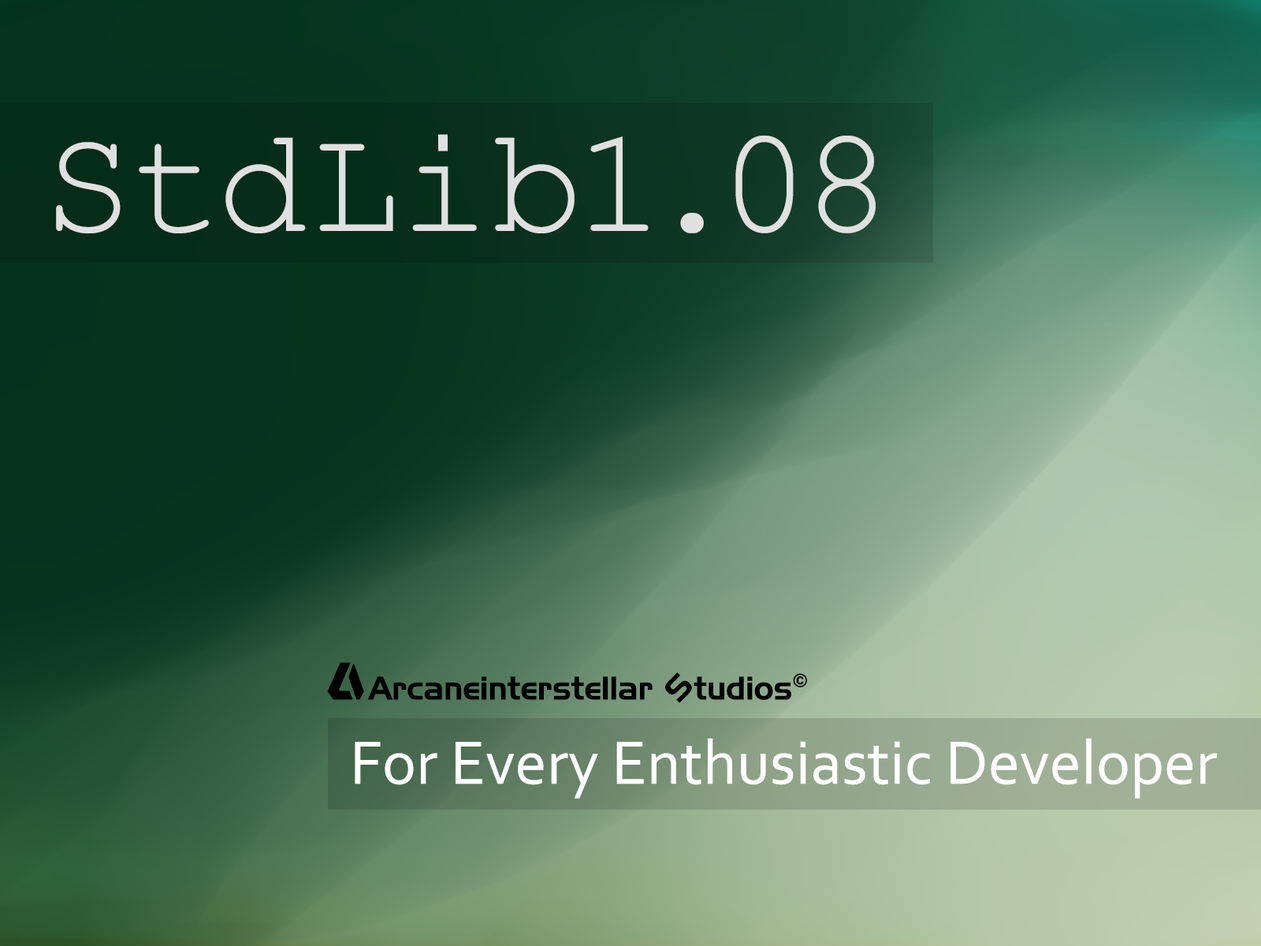
<style>
.page{position:relative;width:1261px;height:946px}
.page>*{position:absolute;margin:0}
.t1{font:151.8px "CourierNewPSMT";color:#e0e0e0}
.t2{font:63.9px "Corbel";color:#ffffff}
</style>
<div class="page">
<p class="t1" style="left:56px;top:134px;width:820px;height:99px">StdLib1.08</p>
<p class="t2" style="left:355px;top:738px;width:862px;height:60px">For Every Enthusiastic Developer</p>
</div>
